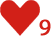
<style>
.page{position:relative;width:52px;height:36px;background:#d22018}
.page>*{position:absolute;margin:0}
.t1{font:23.4px "MyriadPro-Regular";letter-spacing:-0.1em;color:#d22018;font-weight:bold}
</style>
<div class="page">
<p class="t1" style="left:39px;top:19px;width:12px;height:17px">9</p>
</div>
